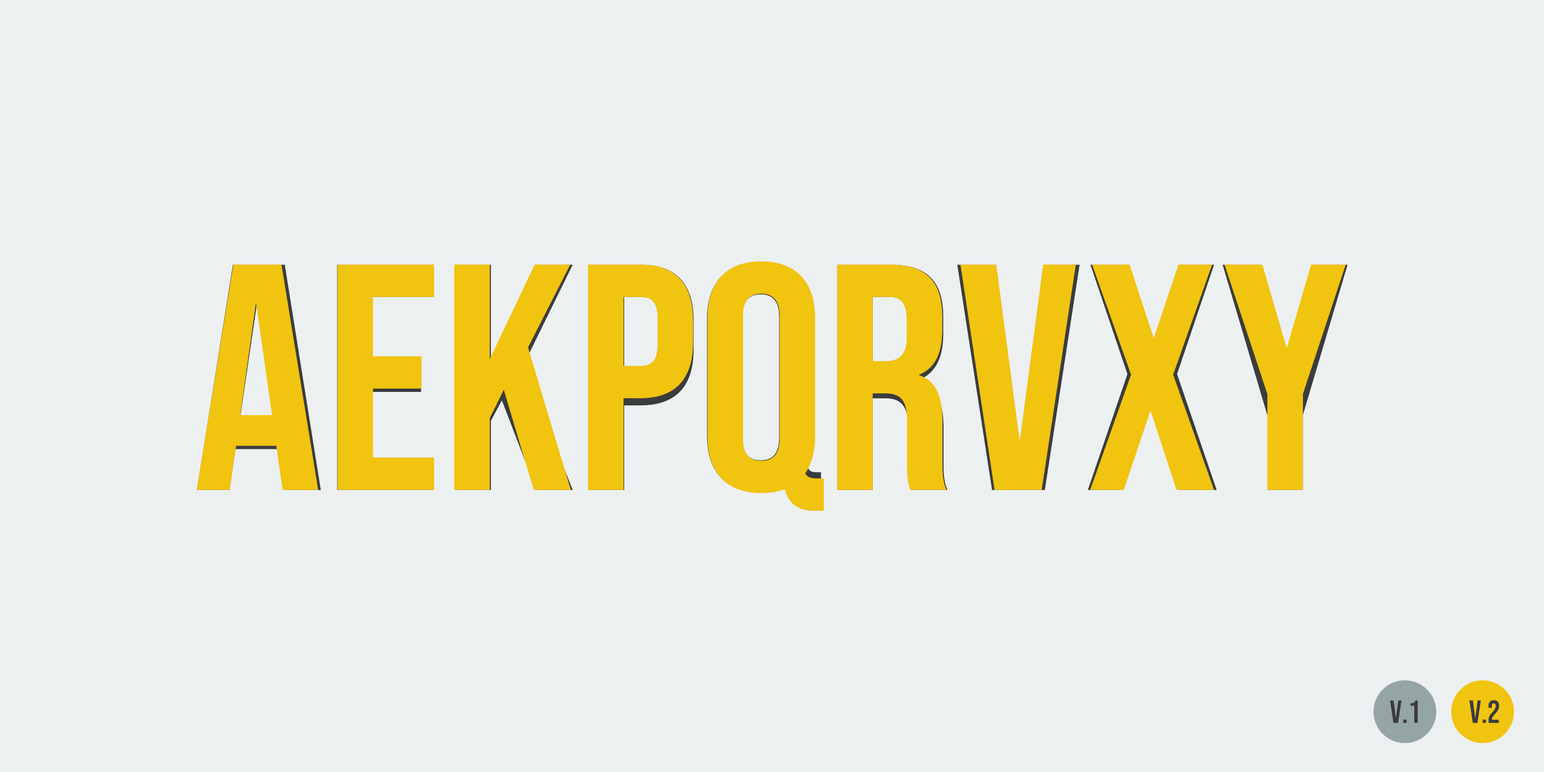
<style>
.page{position:relative;width:1544px;height:772px;background:#ecf0f1}
.page>*{position:absolute;margin:0}
.t1{font:321.7px "BebasNeueOLD-Regular";color:#f1c40f}
.t2{font:321.7px "BebasNeue-Regular";color:#f1c40f}
.t3{font:32.2px "BebasNeue-Regular";color:#3a3b3d}
</style>
<div class="page">
<p class="t1" style="left:197px;top:262px;width:1151px;height:242px">aekpqrvxy</p>
<p class="t2" style="left:197px;top:264px;width:122px;height:226px">A</p>
<p class="t2" style="left:337px;top:264px;width:97px;height:226px">E</p>
<p class="t2" style="left:454px;top:264px;width:117px;height:226px">K</p>
<p class="t2" style="left:588px;top:264px;width:105px;height:226px">P</p>
<p class="t2" style="left:707px;top:261px;width:117px;height:250px">Q</p>
<p class="t2" style="left:837px;top:264px;width:110px;height:226px">R</p>
<p class="t2" style="left:960px;top:264px;width:116px;height:226px">V</p>
<p class="t2" style="left:1090px;top:264px;width:125px;height:226px">X</p>
<p class="t2" style="left:1225px;top:264px;width:121px;height:226px">Y</p>
<p class="t3" style="left:1390px;top:700px;width:28px;height:23px">v.1</p>
<p class="t3" style="left:1469px;top:700px;width:31px;height:23px">v.2</p>
</div>
